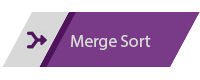
<style>
.page{position:relative;width:200px;height:80px;background:#ffffff}
.page>*{position:absolute;margin:0}
.t1{font:17.5px "MyriadPro-Regular";color:#d8d8d8}
</style>
<div class="page">
<p class="t1" style="left:71px;top:35px;width:80px;height:15px">Merge Sort</p>
</div>
